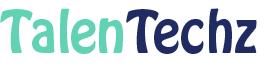
<style>
.page{position:relative;width:272px;height:82px;background:#ffffff}
.page>*{position:absolute;margin:0}
.t1{font:51.9px "HoboStd";color:#61d2b4}
.t2{font:51.9px "HoboStd";color:#202b61}
</style>
<div class="page">
<p class="t1" style="left:0px;top:8px;width:257px;height:46px">Talen<span class="t2">Techz</span></p>
</div>
